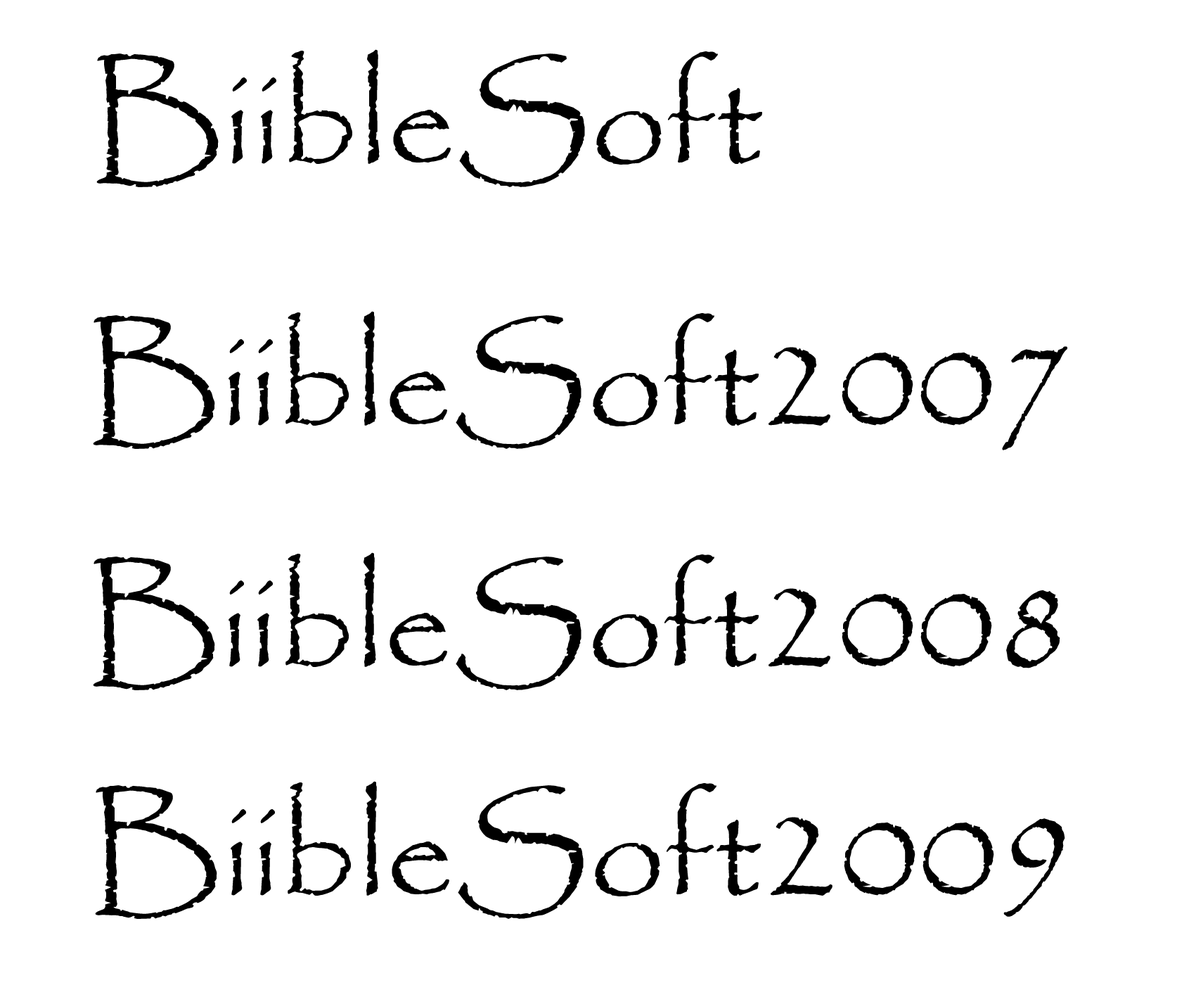
<style>
.page{position:relative;width:1196px;height:997px;background:#ffffff}
.page>*{position:absolute;margin:0}
.t1{font:137.2px "Papyrus-Regular";color:#000000}
</style>
<div class="page">
<p class="t1" style="left:96px;top:49px;width:666px;height:138px">BiibleSoft</p>
<p class="t1" style="left:93px;top:311px;width:975px;height:139px">BiibleSoft2007</p>
<p class="t1" style="left:93px;top:552px;width:968px;height:138px">BiibleSoft2008</p>
<p class="t1" style="left:95px;top:781px;width:971px;height:138px">BiibleSoft2009</p>
</div>
